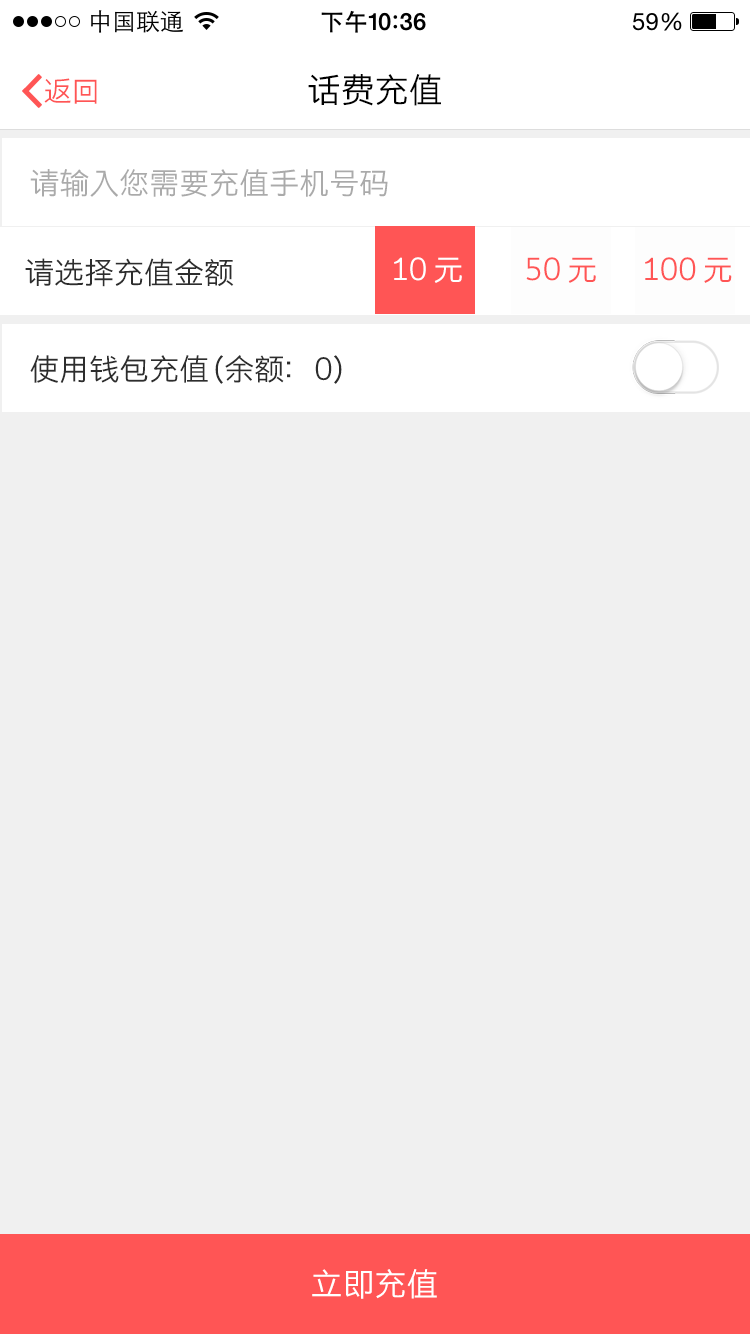
<style>
.page{position:relative;width:750px;height:1334px;background:#f0f0f0}
.page>*{position:absolute;margin:0}
.t1{font:28px "STHeitiSC-Light";color:#ff5555}
.t2{font:34px "STHeitiSC-Light";color:#000000}
.t3{font:30px "STHeitiSC-Light";color:#aaaaaa}
.t4{font:30px "STHeitiSC-Light";color:#ffffff}
.t5{font:30px "STHeitiSC-Light";color:#ff5555}
.t6{font:30px "STHeitiSC-Light";color:#2d2d2d}
.t7{font:32px "STHeitiSC-Light";color:#ffffff}
</style>
<div class="page">
<p class="t1" style="left:44px;top:78px;width:53px;height:26px">返回</p>
<p class="t2" style="left:308px;top:74px;width:133px;height:32px">话费充值</p>
<p class="t3" style="left:30px;top:169px;width:358px;height:28px">请输入您需要充值手机号码</p>
<p class="t4" style="left:394px;top:257px;width:68px;height:26px">10 元</p>
<p class="t5" style="left:526px;top:257px;width:70px;height:26px">50 元</p>
<p class="t5" style="left:645px;top:257px;width:87px;height:26px">100 元</p>
<p class="t6" style="left:25px;top:258px;width:209px;height:29px">请选择充值金额</p>
<p class="t6" style="left:30px;top:355px;width:403px;height:29px">使用钱包充值（余额：2341 元）</p>
<p class="t6" style="left:30px;top:355px;width:312px;height:29px">使用钱包充值（余额：0）</p>
<p class="t7" style="left:312px;top:1269px;width:125px;height:30px">立即充值</p>
</div>
